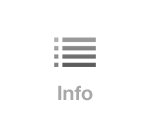
<style>
.page{position:relative;width:150px;height:130px;background:#ffffff}
.page>*{position:absolute;margin:0}
.t1{font:20px "AlteHaasGrotesk_Bold";color:#a8a8a8}
</style>
<div class="page">
<p class="t1" style="left:58px;top:85px;width:35px;height:16px">Info</p>
</div>
